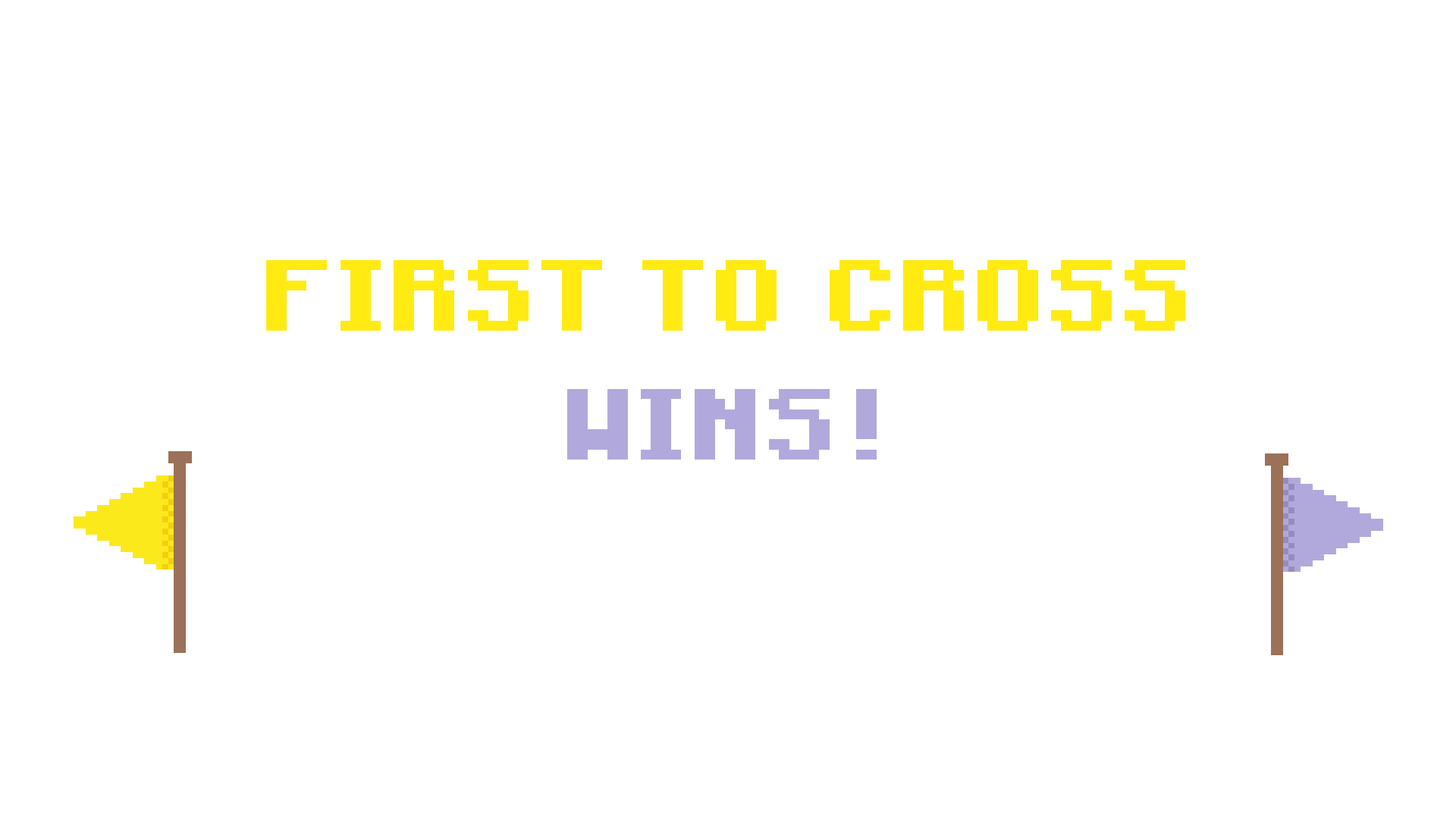
<style>
.page{position:relative;width:1456px;height:819px;background:#ffffff}
.page>*{position:absolute;margin:0}
.t1{font:80.5px "Mojang-Bold";letter-spacing:0.01em;color:#ffeb12}
.t2{font:80.5px "Mojang-Bold";letter-spacing:0.01em;color:#b1a9db}
</style>
<div class="page">
<p class="t1" style="left:266px;top:260px;width:919px;height:71px">FIRST  TO   CROSS</p>
<p class="t2" style="left:567px;top:389px;width:310px;height:71px">WINS !</p>
</div>
